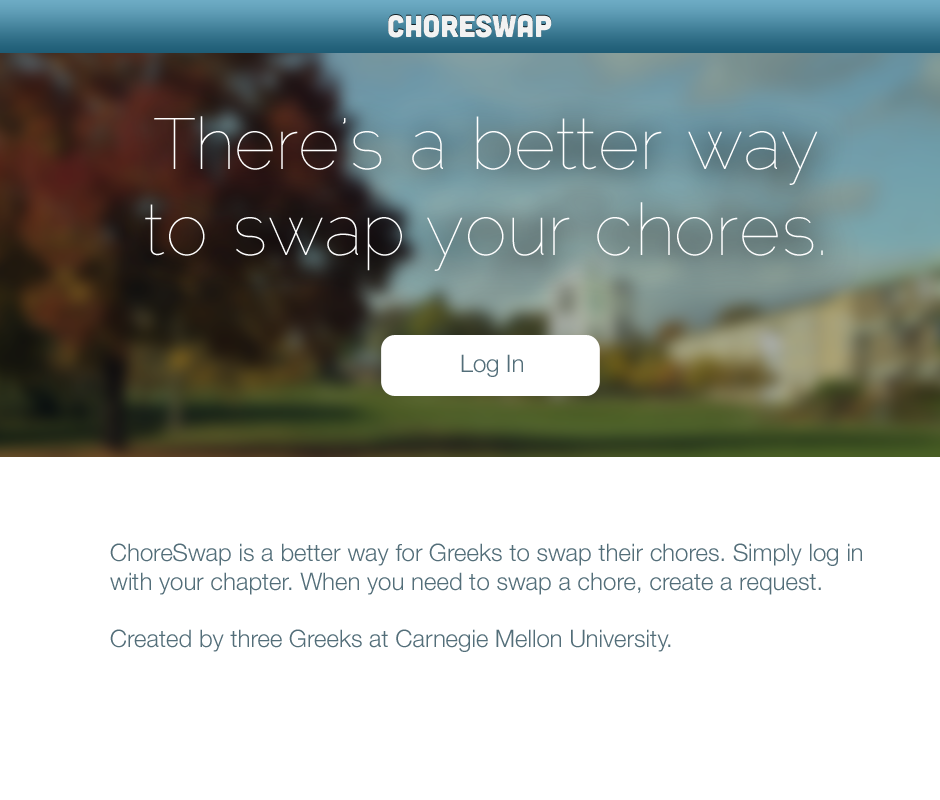
<style>
.page{position:relative;width:940px;height:800px;background:#ffffff}
.page>*{position:absolute;margin:0}
.t1{font:30.5px "Cubano-Regular";color:#f2f2f2}
.t2{font:72px "Raleway-Thin";color:#ffffff}
.t3{font:24px "HelveticaNeue-Light";color:#536e79}
</style>
<div class="page">
<p class="t1" style="left:388px;top:15px;width:164px;height:23px">choreswap</p>
<p class="t2" style="left:145px;top:116px;width:678px;height:155px;text-align:center">There’s a better way<br>to swap your chores.</p>
<p class="t3" style="left:461px;top:354px;width:62px;height:23px">Log In</p>
<p class="t3" style="left:110px;top:543px;width:752px;height:109px">ChoreSwap is a better way for Greeks to swap their chores. Simply log in <br>with your chapter. When you need to swap a chore, create a request. <br><br>Created by three Greeks at Carnegie Mellon University.</p>
</div>
